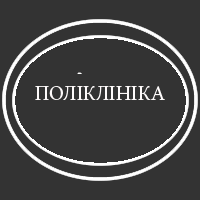
<style>
.page{position:relative;width:200px;height:200px;background:#333333}
.page>*{position:absolute;margin:0}
.t1{font:20px "MinionPro-Regular";color:#fefbfb;text-transform:uppercase}
</style>
<div class="page">
<p class="t1" style="left:35px;top:86px;width:130px;height:14px">Поліклініка</p>
</div>
